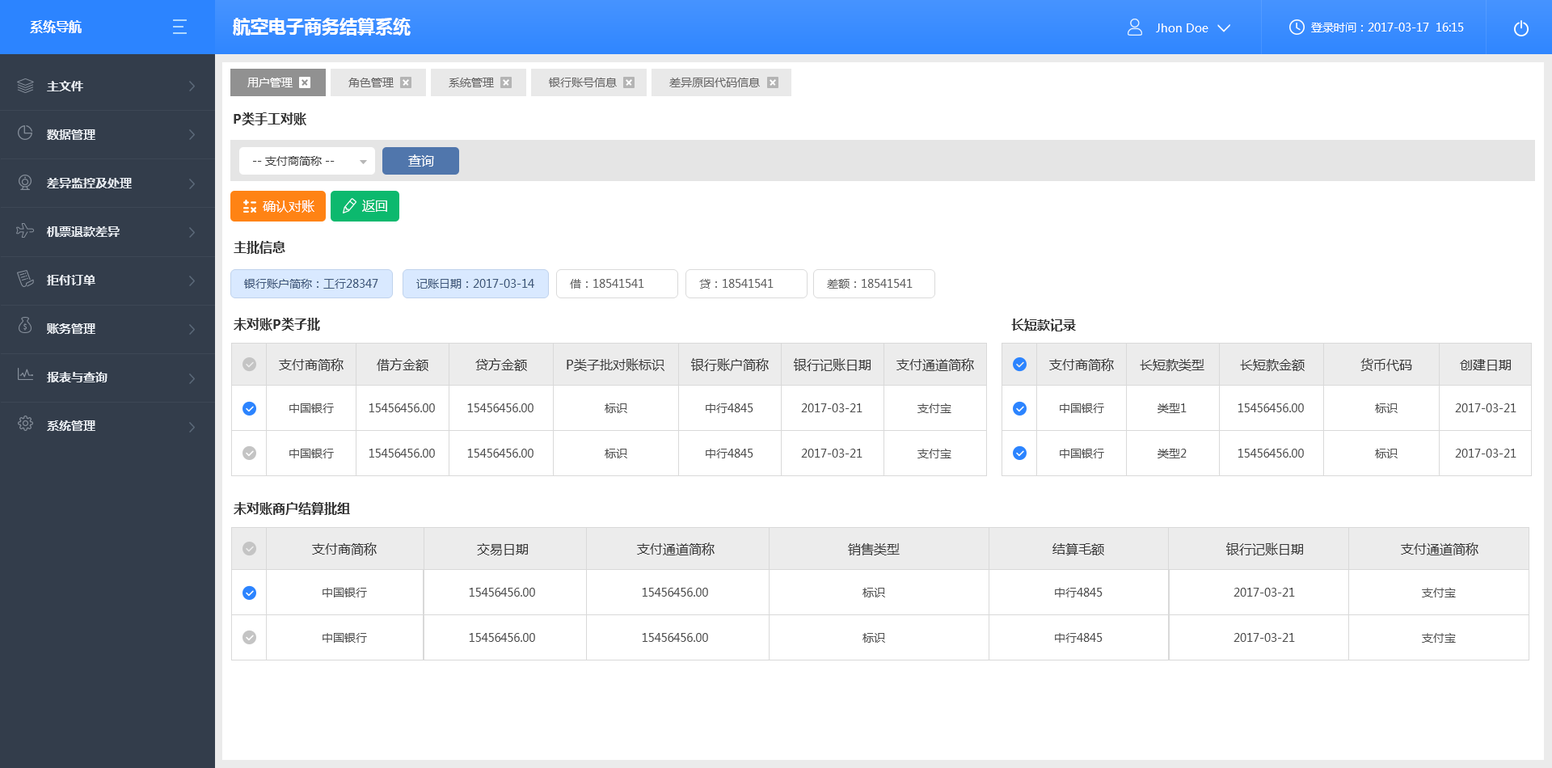
<style>
.page{position:relative;width:1552px;height:768px;background:#ffffff}
.page>*{position:absolute;margin:0}
.t1{font:17.8px "MicrosoftYaHei-Bold";color:#ffffff;text-transform:uppercase}
.t2{font:12.9px "MicrosoftYaHei-Bold";color:#fefefe;text-transform:uppercase}
.t3{font:11.3px "MicrosoftYaHei";color:#ffffff}
.t4{font:11.3px "MicrosoftYaHei";color:#fefefe;text-transform:uppercase}
.t5{font:11.3px "MicrosoftYaHei";color:#ffffff;text-transform:uppercase}
.t6{font:11.3px "MicrosoftYaHei";color:#686767;text-transform:uppercase}
.t7{font:12.1px/48.5px "MicrosoftYaHei-Bold";color:#e7ebf0;text-transform:uppercase}
.t8{font:12.9px "MicrosoftYaHei-Bold";color:#343434;text-transform:uppercase}
.t9{font:11.3px "MicrosoftYaHei";color:#3d3d3d;text-transform:uppercase}
.t10{font:12.9px "MicrosoftYaHei";color:#ffffff;text-transform:uppercase}
.t11{font:11.3px "MicrosoftYaHei";color:#3e5779;text-transform:uppercase}
.t12{font:11.3px "MicrosoftYaHei";color:#626262;text-transform:uppercase}
.t13{font:12.9px "MicrosoftYaHei";color:#393939;text-transform:uppercase}
.t14{font:11.3px/45.3px "MicrosoftYaHei";color:#4e4e4e;text-transform:uppercase}
</style>
<div class="page">
<p class="t1" style="left:233px;top:18px;width:178px;height:18px">航空电子商务结算系统</p>
<p class="t2" style="left:30px;top:20px;width:52px;height:13px">系统导航</p>
<p class="t3" style="left:1156px;top:23px;width:53px;height:9px">Jhon Doe</p>
<p class="t4" style="left:1311px;top:23px;width:153px;height:9px">登录时间：2017-03-17  16:15</p>
<p class="t5" style="left:247px;top:78px;width:46px;height:9px">用户管理</p>
<p class="t6" style="left:348px;top:78px;width:46px;height:9px">角色管理</p>
<p class="t6" style="left:449px;top:78px;width:45px;height:9px">系统管理</p>
<p class="t6" style="left:549px;top:78px;width:68px;height:9px">银行账号信息</p>
<p class="t6" style="left:669px;top:78px;width:91px;height:9px">差异原因代码信息</p>
<p class="t7" style="left:47px;top:81px;width:85px;height:350px">主文件<br>数据管理<br>差异监控及处理<br>机票退款差异<br>拒付订单<br>账务管理<br>报表与查询<br>系统管理</p>
<p class="t8" style="left:234px;top:112px;width:72px;height:13px">P类手工对账</p>
<p class="t9" style="left:253px;top:156px;width:82px;height:10px">-- 支付商简称 --</p>
<p class="t10" style="left:408px;top:154px;width:26px;height:13px">查询</p>
<p class="t10" style="left:263px;top:200px;width:52px;height:13px">确认对账</p>
<p class="t10" style="left:362px;top:200px;width:25px;height:12px">返回</p>
<p class="t8" style="left:234px;top:241px;width:51px;height:13px">主批信息</p>
<p class="t11" style="left:244px;top:279px;width:134px;height:10px">银行账户简称：工行28347</p>
<p class="t11" style="left:416px;top:279px;width:118px;height:10px">记账日期：2017-03-14</p>
<p class="t12" style="left:570px;top:279px;width:74px;height:10px">借：18541541</p>
<p class="t12" style="left:699px;top:279px;width:75px;height:10px">贷：18541541</p>
<p class="t12" style="left:827px;top:279px;width:86px;height:10px">差额：18541541</p>
<p class="t8" style="left:234px;top:318px;width:86px;height:13px">未对账P类子批</p>
<p class="t8" style="left:1011px;top:319px;width:65px;height:13px">长短款记录</p>
<p class="t13" style="left:279px;top:358px;width:65px;height:13px">支付商简称</p>
<p class="t13" style="left:377px;top:358px;width:52px;height:13px">借方金额</p>
<p class="t13" style="left:475px;top:358px;width:52px;height:13px">贷方金额</p>
<p class="t13" style="left:567px;top:358px;width:98px;height:13px">P类子批对账标识</p>
<p class="t13" style="left:691px;top:358px;width:78px;height:13px">银行账户简称</p>
<p class="t13" style="left:794px;top:358px;width:77px;height:13px">银行记账日期</p>
<p class="t13" style="left:897px;top:358px;width:77px;height:13px">支付通道简称</p>
<p class="t13" style="left:1049px;top:358px;width:65px;height:13px">支付商简称</p>
<p class="t13" style="left:1140px;top:359px;width:65px;height:12px">长短款类型</p>
<p class="t13" style="left:1240px;top:359px;width:65px;height:12px">长短款金额</p>
<p class="t13" style="left:1361px;top:358px;width:52px;height:13px">货币代码</p>
<p class="t13" style="left:1460px;top:359px;width:51px;height:12px">创建日期</p>
<p class="t14" style="left:289px;top:403px;width:45px;height:55px;text-align:center">中国银行<br>中国银行</p>
<p class="t14" style="left:369px;top:403px;width:66px;height:55px;text-align:center">15456456.00<br>15456456.00</p>
<p class="t14" style="left:467px;top:403px;width:67px;height:55px;text-align:center">15456456.00<br>15456456.00</p>
<p class="t14" style="left:605px;top:403px;width:22px;height:55px;text-align:center">标识<br>标识</p>
<p class="t14" style="left:706px;top:403px;width:48px;height:55px;text-align:center">中行4845<br>中行4845</p>
<p class="t14" style="left:801px;top:403px;width:62px;height:55px;text-align:center">2017-03-21<br>2017-03-21</p>
<p class="t14" style="left:918px;top:403px;width:34px;height:55px;text-align:center">支付宝<br>支付宝</p>
<p class="t14" style="left:1060px;top:403px;width:44px;height:55px;text-align:center">中国银行<br>中国银行</p>
<p class="t14" style="left:1158px;top:403px;width:29px;height:55px;text-align:center">类型1<br>类型2</p>
<p class="t14" style="left:1238px;top:403px;width:66px;height:55px;text-align:center">15456456.00<br>15456456.00</p>
<p class="t14" style="left:1375px;top:403px;width:23px;height:55px;text-align:center">标识<br>标识</p>
<p class="t14" style="left:1455px;top:403px;width:62px;height:55px;text-align:center">2017-03-21<br>2017-03-21</p>
<p class="t8" style="left:234px;top:502px;width:116px;height:13px">未对账商户结算批组</p>
<p class="t13" style="left:312px;top:543px;width:65px;height:12px">支付商简称</p>
<p class="t13" style="left:477px;top:543px;width:51px;height:12px">交易日期</p>
<p class="t13" style="left:637px;top:543px;width:78px;height:12px">支付通道简称</p>
<p class="t13" style="left:848px;top:543px;width:52px;height:12px">销售类型</p>
<p class="t13" style="left:1053px;top:543px;width:51px;height:12px">结算毛额</p>
<p class="t13" style="left:1227px;top:543px;width:76px;height:12px">银行记账日期</p>
<p class="t13" style="left:1401px;top:543px;width:78px;height:12px">支付通道简称</p>
<p class="t14" style="left:323px;top:588px;width:44px;height:55px;text-align:center">中国银行<br>中国银行</p>
<p class="t14" style="left:469px;top:588px;width:66px;height:54px;text-align:center">15456456.00<br>15456456.00</p>
<p class="t14" style="left:642px;top:588px;width:66px;height:54px;text-align:center">15456456.00<br>15456456.00</p>
<p class="t14" style="left:863px;top:588px;width:22px;height:55px;text-align:center">标识<br>标识</p>
<p class="t14" style="left:1055px;top:588px;width:48px;height:55px;text-align:center">中行4845<br>中行4845</p>
<p class="t14" style="left:1234px;top:588px;width:61px;height:54px;text-align:center">2017-03-21<br>2017-03-21</p>
<p class="t14" style="left:1422px;top:588px;width:34px;height:55px;text-align:center">支付宝<br>支付宝</p>
</div>
